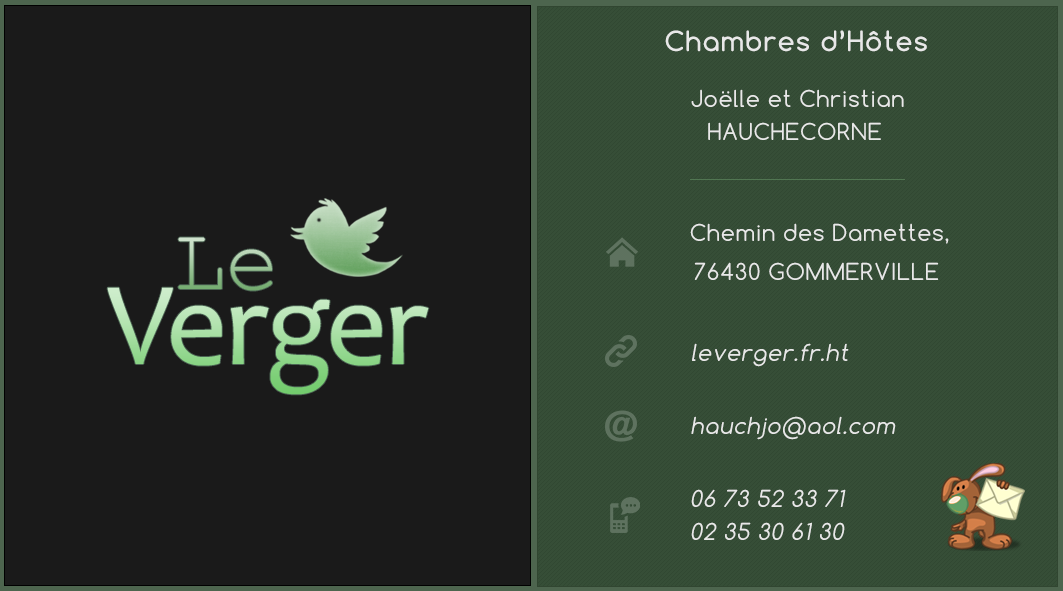
<style>
.page{position:relative;width:1063px;height:591px;background:#1a1a1a}
.page>*{position:absolute;margin:0}
.t1{font:26px "Comfortaa-Regular";letter-spacing:0.05em;color:#e8e8e8;font-weight:bold}
.t2{font:22px/33px "Comfortaa-Regular";letter-spacing:0.05em;color:#e8e8e8}
.t3{font:22px/39px "Comfortaa-Regular";letter-spacing:0.05em;color:#e8e8e8}
.t4{font:90px "CourierNewPSMT"}
.t5{font:120px "Candara"}
.t6{font:22px "Comfortaa-Regular";letter-spacing:0.05em;color:#e8e8e8;font-style:italic}
.t7{font:22px/33px "Comfortaa-Regular";letter-spacing:0.05em;color:#e8e8e8;font-style:italic}
</style>
<div class="page">
<p class="t1" style="left:665px;top:30px;width:262px;height:22px">Chambres d’Hôtes</p>
<p class="t2" style="left:691px;top:89px;width:213px;height:51px;text-align:center">Joëlle et Christian<br>HAUCHECORNE</p>
<p class="t3" style="left:690px;top:223px;width:259px;height:57px;text-align:center">Chemin des Damettes,<br>76430 GOMMERVILLE</p>
<p class="t4" style="left:178px;top:237px;width:94px;height:54px">Le</p>
<p class="t5" style="left:107px;top:287px;width:322px;height:108px">Verger</p>
<p class="t6" style="left:692px;top:343px;width:157px;height:24px">leverger.fr.ht</p>
<p class="t6" style="left:691px;top:416px;width:205px;height:24px">hauchjo@aol.com</p>
<p class="t7" style="left:691px;top:489px;width:155px;height:51px;text-align:center">06 73 52 33 71 <br>02 35 30 61 30</p>
</div>
